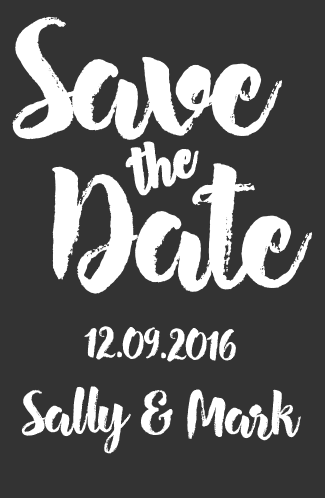
<style>
.page{position:relative;width:325px;height:498px;background:#333333}
.page>*{position:absolute;margin:0}
.t1{font:160px "Hensa-Regular";letter-spacing:-0.035em;color:#ffffff}
.t2{font:60px "Hensa-Regular";letter-spacing:-0.035em;color:#ffffff;font-weight:bold;font-style:italic}
.t3{font:42px "Hensa-Regular";letter-spacing:-0.035em;color:#ffffff}
.t4{font:60px "Hensa-Regular";letter-spacing:-0.035em;color:#ffffff}
</style>
<div class="page">
<p class="t1" style="left:12px;top:16px;width:271px;height:124px">Save</p>
<p class="t2" style="left:125px;top:141px;width:74px;height:55px;rotate:-21deg">the</p>
<p class="t1" style="left:52px;top:163px;width:261px;height:131px">Date</p>
<p class="t3" style="left:84px;top:326px;width:152px;height:36px;rotate:1deg">12.09.2016</p>
<p class="t4" style="left:21px;top:386px;width:280px;height:68px;rotate:1deg">Sally &amp; Mark</p>
</div>
